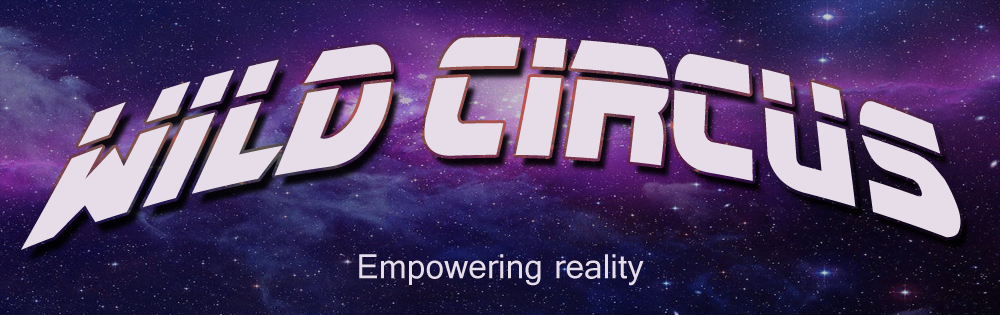
<style>
.page{position:relative;width:1000px;height:315px}
.page>*{position:absolute;margin:0}
.t1{font:198.1px "BladeRunnerMovieFont";color:#e7dde9;scale:0.63 1}
.t2{font:36.3px "Gautami";color:#e7dde9}
</style>
<div class="page">
<p class="t1" style="left:21px;top:37px;width:940px;height:213px">WIlD CIRCUS</p>
<p class="t2" style="left:359px;top:254px;width:285px;height:32px">Empowering reality</p>
</div>
